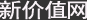
<style>
.page{position:relative;width:87px;height:20px;background:#333333}
.page>*{position:absolute;margin:0}
.t1{font:20px "SimHei";letter-spacing:0.06em;color:#f8f2f7;scale:1.17 1}
</style>
<div class="page">
<p class="t1" style="left:0px;top:0px;width:88px;height:20px">新价值网</p>
</div>
